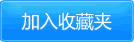
<style>
.page{position:relative;width:134px;height:42px;background:#0887ff}
.page>*{position:absolute;margin:0}
.t1{font:18px "MicrosoftYaHei";color:#ffffff}
</style>
<div class="page">
<p class="t1" style="left:21px;top:12px;width:91px;height:19px">加入收藏夹</p>
</div>
